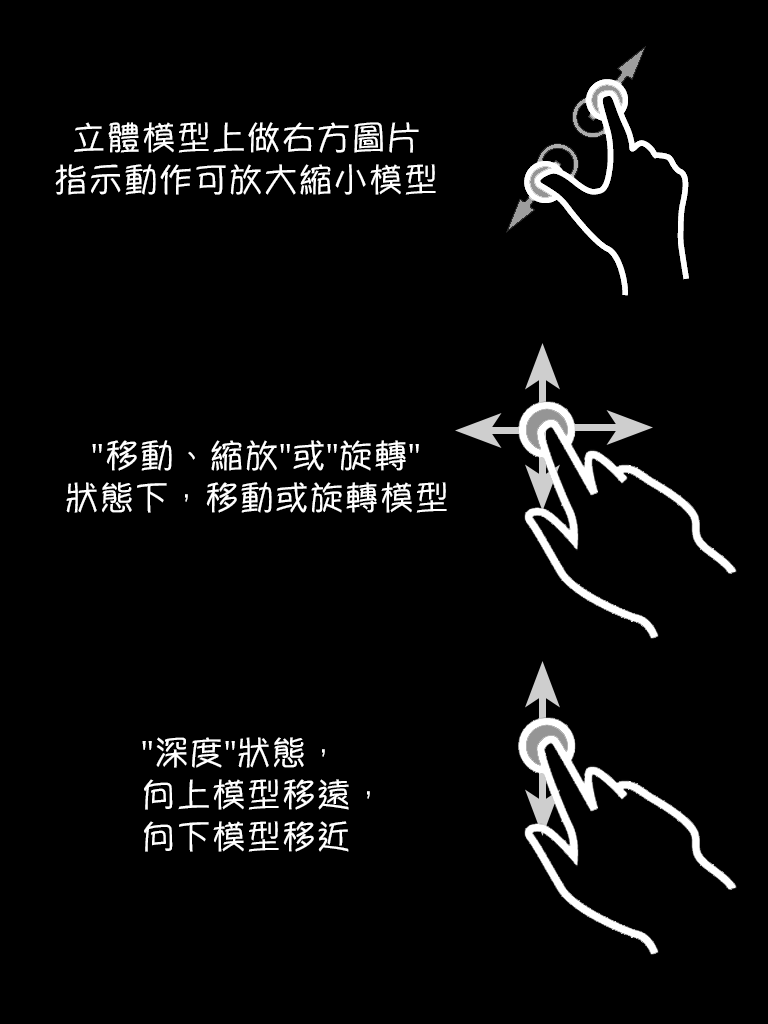
<style>
.page{position:relative;width:768px;height:1024px;background:#000000}
.page>*{position:absolute;margin:0}
.t1{font:35px "YuppyTC-Regular";color:#ffffff}
</style>
<div class="page">
<p class="t1" style="left:55px;top:122px;width:381px;height:73px;text-align:center">立體模型上做右方圖片<br>指示動作可放大縮小模型</p>
<p class="t1" style="left:66px;top:440px;width:381px;height:73px;text-align:center">"移動、縮放"或"旋轉"<br>狀態下，移動或旋轉模型</p>
<p class="t1" style="left:142px;top:737px;width:228px;height:115px">"深度"狀態，<br>向上模型移遠，<br>向下模型移近</p>
</div>
